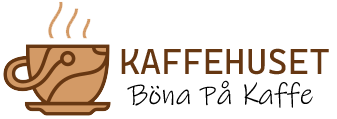
<style>
.page{position:relative;width:337px;height:119px;background:#ffffff}
.page>*{position:absolute;margin:0}
.t1{font:36px "CascadiaCode-Roman";color:#663712}
.t2{font:30px "InkFree";color:#000000}
</style>
<div class="page">
<p class="t1" style="left:121px;top:48px;width:208px;height:27px">KAFFEHUSET</p>
<p class="t2" style="left:127px;top:80px;width:186px;height:28px">Böna På Kaffe</p>
</div>
